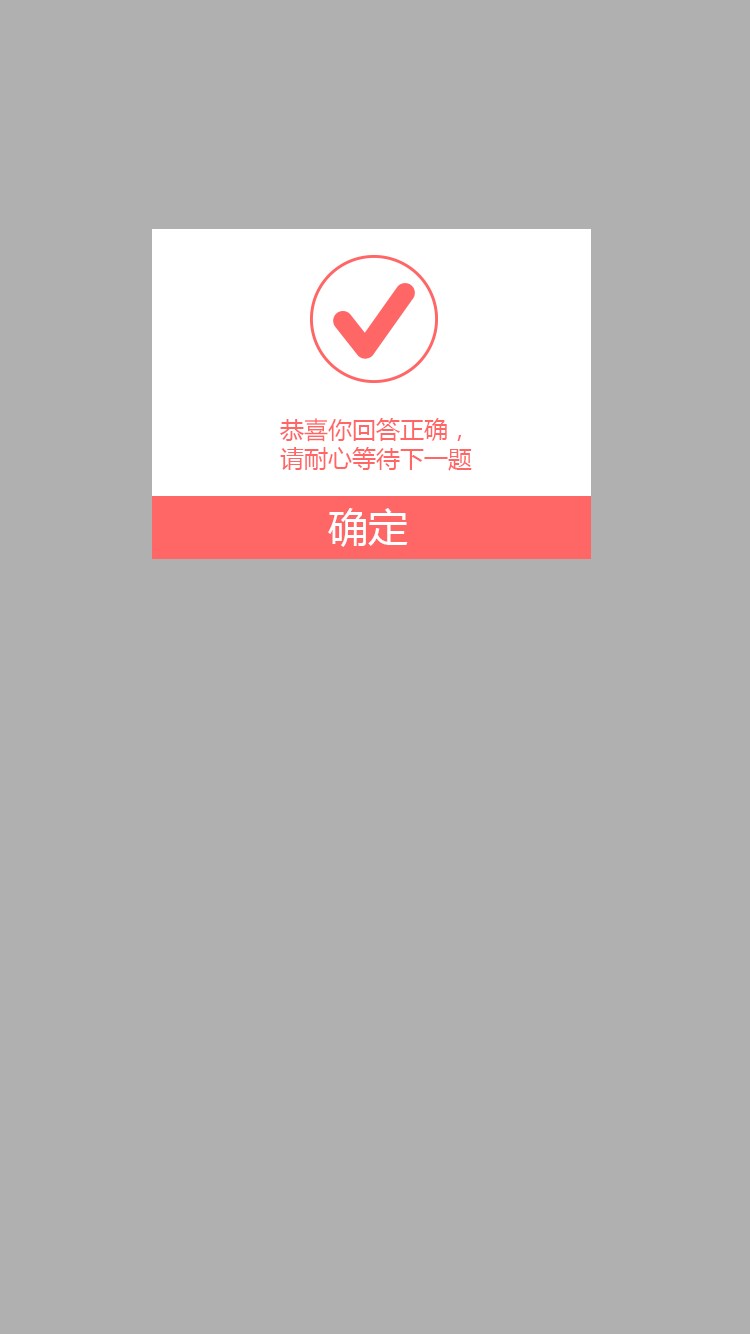
<style>
.page{position:relative;width:750px;height:1334px;background:#b0b0b0}
.page>*{position:absolute;margin:0}
.t1{font:24px "MicrosoftYaHei";color:#ff6666}
.t2{font:40px "MicrosoftYaHei";color:#ffffff}
</style>
<div class="page">
<p class="t1" style="left:280px;top:418px;width:192px;height:53px">恭喜你回答正确，<br>请耐心等待下一题</p>
<p class="t2" style="left:328px;top:508px;width:80px;height:39px">确定</p>
</div>
